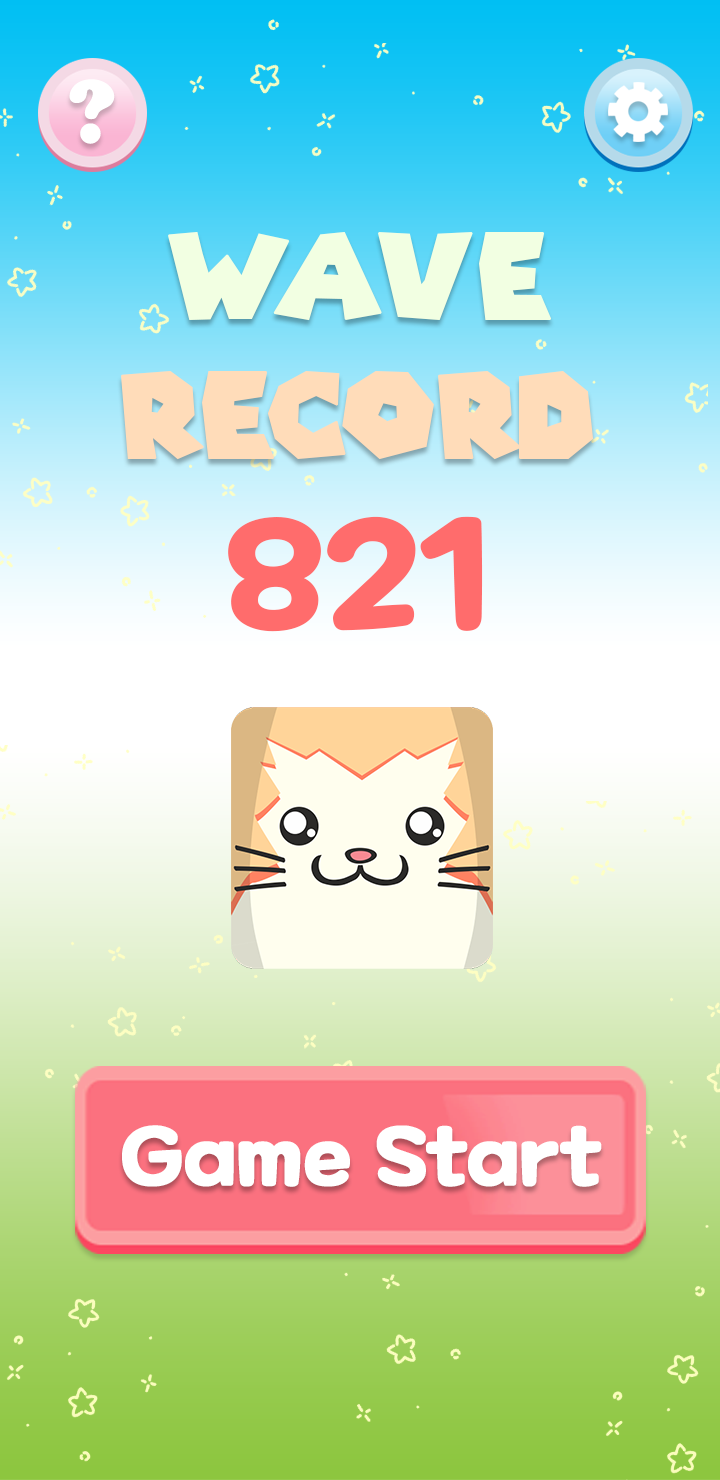
<style>
.page{position:relative;width:720px;height:1480px}
.page>*{position:absolute;margin:0}
.t1{font:94.5px "CooperBlack";color:#ffffff}
.t2{font:115.9px "SuperMarioGalaxy";color:#ffdcb9;font-weight:bold}
.t3{font:115.9px "SuperMarioGalaxy";color:#f2ffe2;font-weight:bold}
.t4{font:149.3px "MaplestoryBold";color:#ff6c6c;font-weight:bold}
.t5{font:80px "MaplestoryBold";color:#ffffff;font-weight:bold}
</style>
<div class="page">
<p class="t1" style="left:69px;top:79px;width:46px;height:65px">?</p>
<p class="t2" style="left:121px;top:231px;width:473px;height:229px;text-align:center"><span class="t3">WAVE<br></span>Record</p>
<p class="t4" style="left:228px;top:516px;width:255px;height:116px">821</p>
<p class="t5" style="left:122px;top:1125px;width:480px;height:62px">Game Start</p>
</div>
